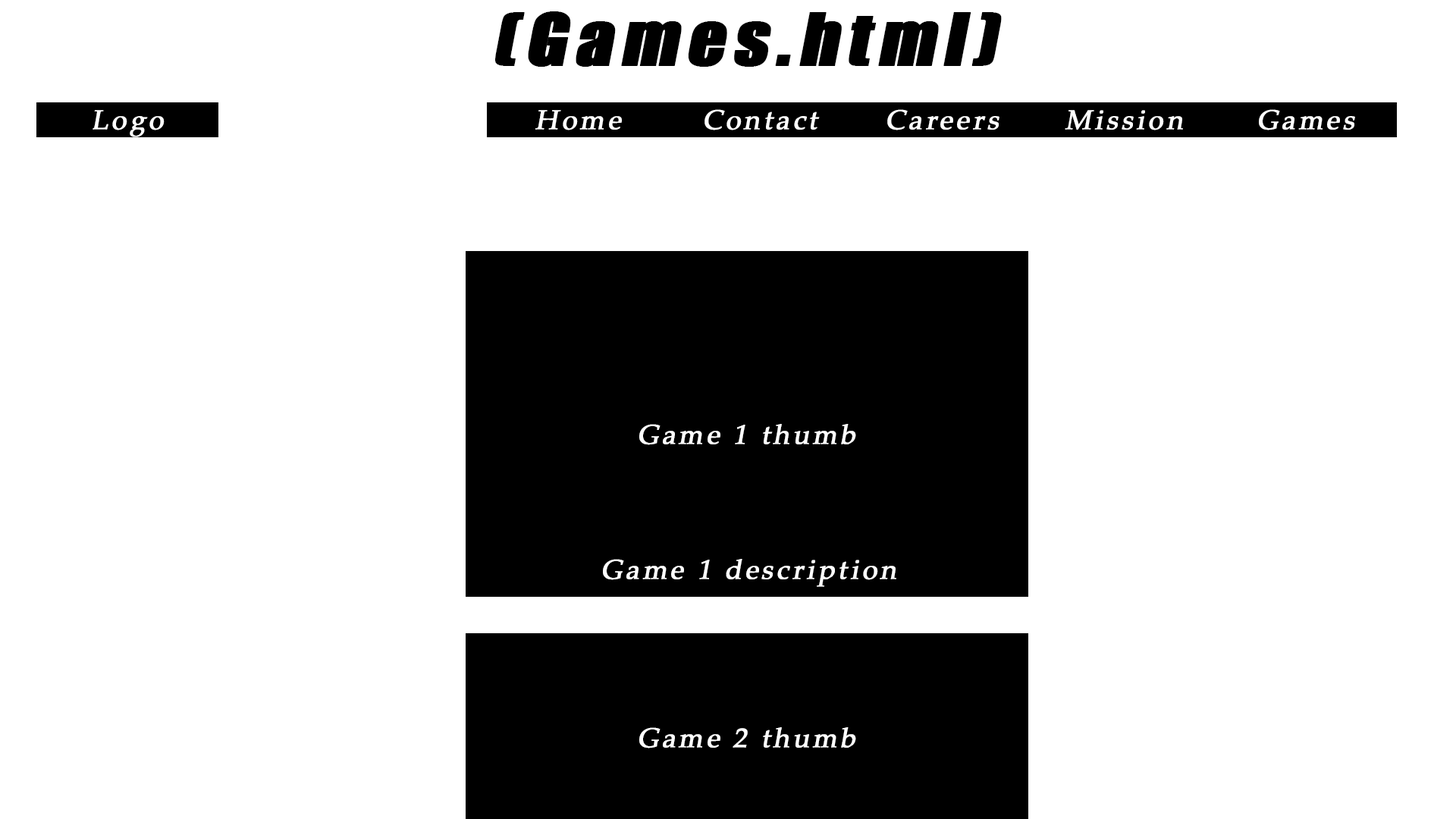
<style>
.page{position:relative;width:1456px;height:819px;background:#ffffff}
.page>*{position:absolute;margin:0}
.t1{font:66.7px "Impact";letter-spacing:0.1em;color:#000000;font-weight:bold;font-style:italic;scale:1.09 1}
.t2{font:27.3px "PalatinoLinotype-Roman";letter-spacing:0.1em;color:#ffffff;font-weight:bold;font-style:italic}
</style>
<div class="page">
<p class="t1" style="left:495px;top:11px;width:507px;height:56px">(Games.html)</p>
<p class="t2" style="left:93px;top:110px;width:72px;height:27px">Logo</p>
<p class="t2" style="left:535px;top:110px;width:87px;height:20px">Home</p>
<p class="t2" style="left:704px;top:109px;width:116px;height:21px">Contact</p>
<p class="t2" style="left:887px;top:109px;width:112px;height:21px">Careers</p>
<p class="t2" style="left:1065px;top:110px;width:118px;height:20px">Mission</p>
<p class="t2" style="left:1259px;top:109px;width:96px;height:21px">Games</p>
<p class="t2" style="left:639px;top:424px;width:217px;height:21px">Game 1 thumb</p>
<p class="t2" style="left:603px;top:559px;width:293px;height:28px">Game 1 description</p>
<p class="t2" style="left:639px;top:727px;width:217px;height:21px">Game 2 thumb</p>
</div>
